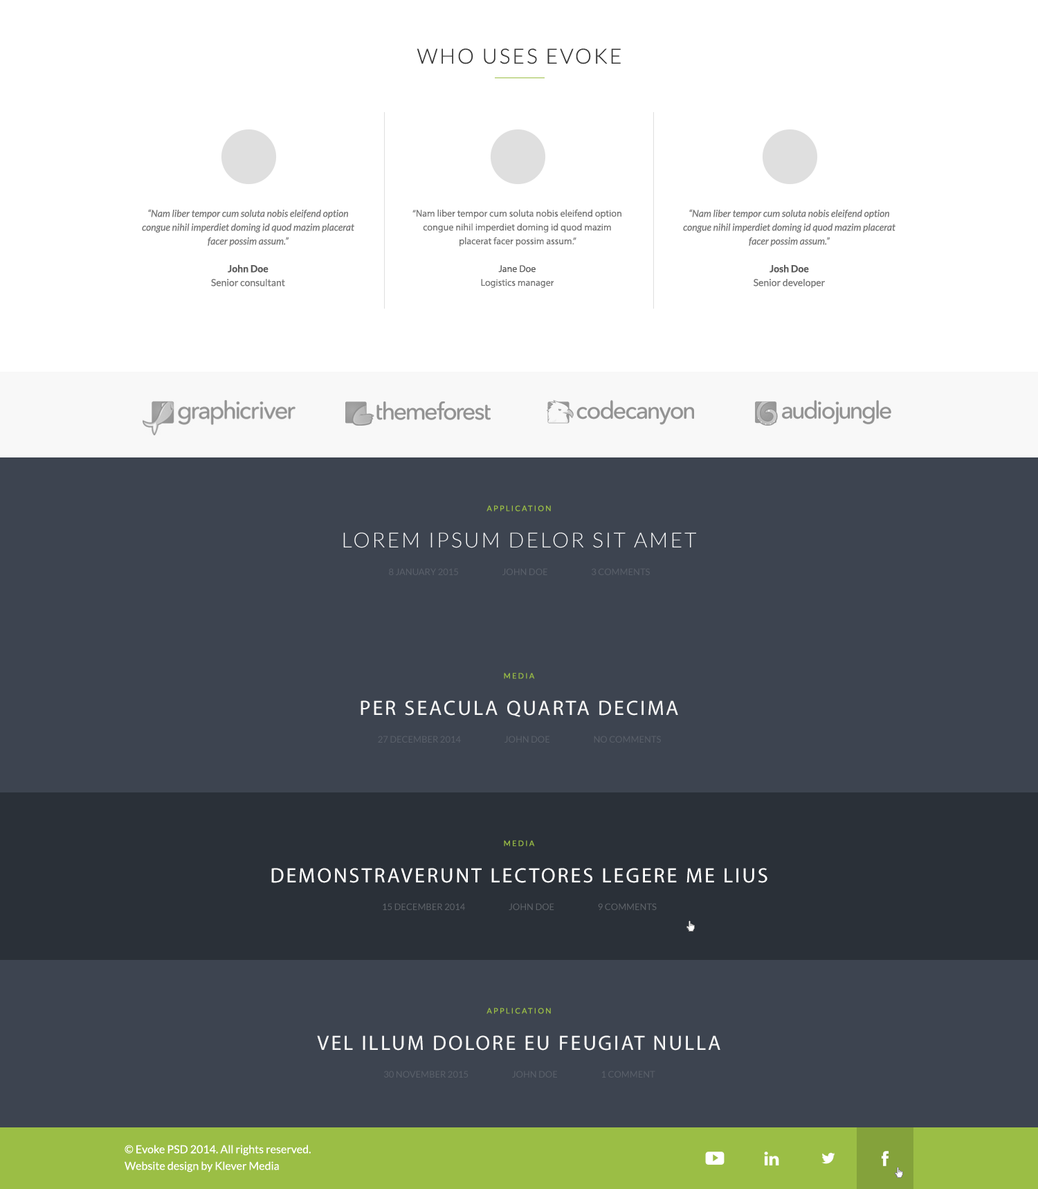
<style>
.page{position:relative;width:1038px;height:1189px;background:#3d4450}
.page>*{position:absolute;margin:0}
.t1{font:20.8px "Lato-Light";letter-spacing:0.1em;color:#383838;text-transform:uppercase}
.t2{font:9.7px/13.8px "Lato-Italic";color:#767676}
.t3{font:9.7px/13.8px "Lato-Bold";color:#5c5c5c}
.t4{font:9.7px/13.8px "Lato-Regular";color:#767676}
.t5{font:9.7px/13.8px "MyriadPro-Regular";color:#767676}
.t6{font:9.7px/13.8px "MyriadPro-Regular";color:#5c5c5c}
.t7{font:7.6px "Lato-Regular";letter-spacing:0.2em;color:#9bbe45;text-transform:uppercase}
.t8{font:20.8px "Lato-Light";letter-spacing:0.1em;color:#f8f8f8;text-transform:uppercase}
.t9{font:9px "Lato-Regular";color:#5a606a;text-transform:uppercase}
.t10{font:20.8px "MyriadPro-Regular";letter-spacing:0.1em;color:#f8f8f8;text-transform:uppercase}
.t11{font:20.8px "MyriadPro-Regular";letter-spacing:0.1em;color:#ffffff;text-transform:uppercase}
.t12{font:9px "Lato-Regular";color:#5f646a;text-transform:uppercase}
.t13{font:11.1px/16.6px "Lato-Regular";color:#ffffff}
</style>
<div class="page">
<p class="t1" style="left:417px;top:48px;width:204px;height:16px">who uses evoke</p>
<p class="t2" style="left:142px;top:209px;width:212px;height:78px;text-align:center">“Nam liber tempor cum soluta nobis eleifend option congue nihil imperdiet doming id quod mazim placerat facer possim assum.”<br><br><span class="t3">John Doe<br></span><span class="t4">Senior consultant</span></p>
<p class="t5" style="left:413px;top:209px;width:209px;height:79px;text-align:center">“Nam liber tempor cum soluta nobis eleifend option congue nihil imperdiet doming id quod mazim placerat facer possim assum.”<br><br><span class="t6">Jane Doe<br></span>Logistics manager</p>
<p class="t2" style="left:683px;top:209px;width:213px;height:79px;text-align:center">“Nam liber tempor cum soluta nobis eleifend option congue nihil imperdiet doming id quod mazim placerat facer possim assum.”<br><br><span class="t3">Josh Doe<br></span><span class="t4">Senior developer</span></p>
<p class="t7" style="left:487px;top:505px;width:64px;height:7px">application</p>
<p class="t8" style="left:343px;top:532px;width:353px;height:16px">Lorem ipsum delor sit amet</p>
<p class="t9" style="left:389px;top:568px;width:261px;height:7px">8 January 2015                         John Doe                         3 comments</p>
<p class="t7" style="left:504px;top:673px;width:31px;height:6px">media</p>
<p class="t10" style="left:361px;top:701px;width:317px;height:16px">Per seacula quarta decima</p>
<p class="t9" style="left:378px;top:736px;width:283px;height:7px">27 December 2014                         John Doe                         no comments</p>
<p class="t7" style="left:504px;top:840px;width:31px;height:7px">media</p>
<p class="t7" style="left:504px;top:840px;width:31px;height:7px">media</p>
<p class="t11" style="left:271px;top:868px;width:497px;height:15px">Demonstraverunt lectores legere me lius</p>
<p class="t12" style="left:383px;top:903px;width:274px;height:7px">15 December 2014                         John Doe                         9 comments</p>
<p class="t12" style="left:383px;top:903px;width:274px;height:7px">15 December 2014                         John Doe                         9 comments</p>
<p class="t7" style="left:487px;top:1008px;width:64px;height:6px">application</p>
<p class="t10" style="left:317px;top:1036px;width:404px;height:15px">Vel illum dolore eu feugiat nulla</p>
<p class="t9" style="left:384px;top:1071px;width:272px;height:7px">30 November 2015                         John Doe                         1 comment</p>
<p class="t13" style="left:125px;top:1145px;width:186px;height:28px">© Evoke PSD 2014. All rights reserved.<br>Website design by Klever Media</p>
</div>
